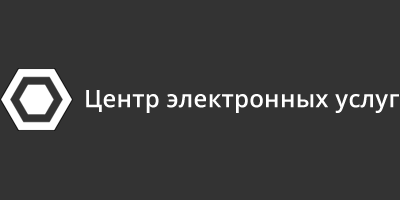
<style>
.page{position:relative;width:400px;height:200px;background:#333333}
.page>*{position:absolute;margin:0}
.t1{font:24px "OpenSans-Semibold";letter-spacing:0.01em;color:#ffffff}
</style>
<div class="page">
<p class="t1" style="left:86px;top:90px;width:313px;height:23px">Центр электронных услуг</p>
</div>
